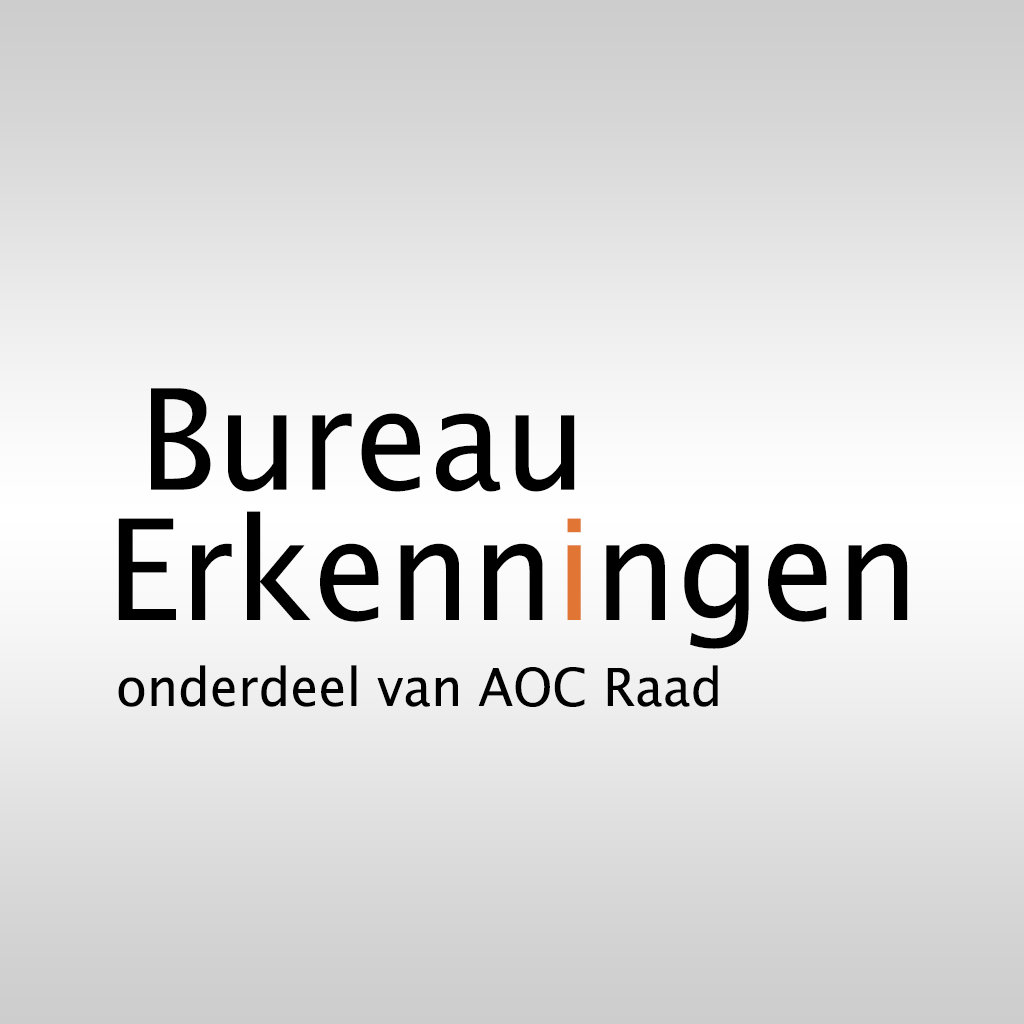
<style>
.page{position:relative;width:1024px;height:1024px}
.page>*{position:absolute;margin:0}
.t1{font:140.2px "LucidaSansUnicode";color:#000000;scale:0.96 1}
.t2{font:140.2px "LucidaSansUnicode";color:#e07534;scale:0.96 1}
.t3{font:52.6px "LucidaSansUnicode";color:#000000;scale:0.96 1}
</style>
<div class="page">
<p class="t1" style="left:151px;top:388px;width:424px;height:104px">Bureau</p>
<p class="t1" style="left:118px;top:511px;width:790px;height:138px">Erkenn<span class="t2">i</span>ngen</p>
<p class="t3" style="left:118px;top:665px;width:600px;height:42px">onderdeel van AOC Raad</p>
</div>
